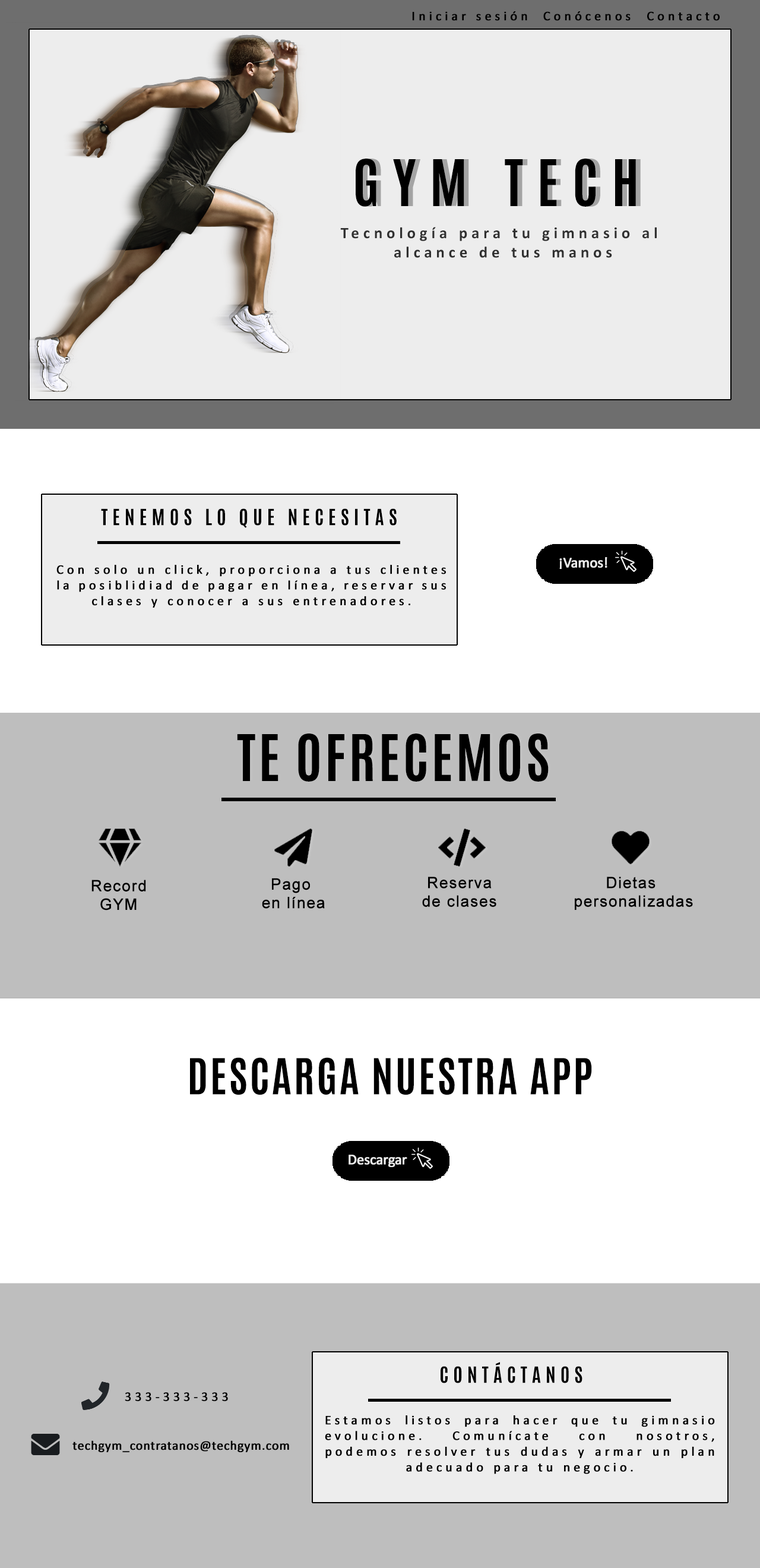
<style>
.page{position:relative;width:760px;height:1568px;background:#bebebe}
.page>*{position:absolute;margin:0}
.t1{font:13.1px "Calibri";letter-spacing:0.25em;color:#000000;font-weight:bold}
.t2{font:54.6px "Antonio-Bold";letter-spacing:0.25em;color:#000000;text-transform:uppercase}
.t3{font:54.6px "Antonio-Bold";letter-spacing:0.25em;text-transform:uppercase}
.t4{font:16px "Calibri-Bold";letter-spacing:0.25em;color:#303030}
.t5{font:19px "Antonio-Bold";letter-spacing:0.25em;color:#000000;text-transform:uppercase}
.t6{font:14.8px "Calibri";letter-spacing:-0.03em;color:#ededed;font-weight:bold}
.t7{font:13.1px "ArialMT";letter-spacing:0.25em;color:#000000;font-weight:bold}
.t8{font:54.6px "Antonio-Bold";letter-spacing:0.05em;color:#000000;text-transform:uppercase}
.t9{font:54.6px "Antonio-Bold";letter-spacing:0.05em;text-transform:uppercase}
.t10{font:15.4px "ArialMT";letter-spacing:0.05em;color:#000000;font-weight:bold}
.t11{font:42.2px "Antonio-Bold";letter-spacing:0.05em;color:#000000;text-transform:uppercase}
.t12{font:13.1px "Calibri";letter-spacing:0.02em;color:#000000;font-weight:bold}
</style>
<div class="page">
<p class="t1" style="left:412px;top:11px;width:308px;height:10px">Iniciar sesión  Conócenos  Contacto</p>
<p class="t2" style="left:356px;top:159px;width:280px;height:48px">gym tech</p>
<p class="t3" style="left:361px;top:159px;width:280px;height:48px">gym tech</p>
<p class="t4" style="left:340px;top:227px;width:317px;height:31px;text-align:center">Tecnología para tu gimnasio al <br>alcance de tus manos</p>
<p class="t5" style="left:101px;top:508px;width:296px;height:20px">tenemos lo que necesitas</p>
<p class="t6" style="left:559px;top:557px;width:49px;height:12px">¡Vamos!</p>
<p class="t7" style="left:56px;top:565px;width:390px;height:43px;text-align:justify">Con solo un click, proporciona a tus clientes la posiblidiad de pagar en línea, reservar sus clases y conocer a sus entrenadores.</p>
<p class="t8" style="left:237px;top:734px;width:312px;height:48px">te ofrecemos</p>
<p class="t9" style="left:239px;top:732px;width:312px;height:48px">te ofrecemos</p>
<p class="t10" style="left:91px;top:880px;width:55px;height:31px;text-align:center">Record<br>GYM</p>
<p class="t10" style="left:262px;top:878px;width:63px;height:31px;text-align:center">Pago <br>en línea</p>
<p class="t10" style="left:422px;top:877px;width:75px;height:30px;text-align:center">Reserva<br>de clases</p>
<p class="t10" style="left:575px;top:877px;width:118px;height:33px;text-align:center">Dietas <br>personalizadas</p>
<p class="t11" style="left:190px;top:1057px;width:402px;height:38px">descarga nuestra app</p>
<p class="t6" style="left:349px;top:1155px;width:58px;height:12px">Descargar</p>
<p class="t5" style="left:441px;top:1362px;width:142px;height:21px">contáctanos</p>
<p class="t1" style="left:125px;top:1392px;width:103px;height:9px">333-333-333</p>
<p class="t1" style="left:325px;top:1415px;width:390px;height:59px;text-align:justify">Estamos listos para hacer que tu gimnasio evolucione. Comunícate con nosotros, podemos resolver tus dudas y armar un plan adecuado para tu negocio.</p>
<p class="t12" style="left:72px;top:1440px;width:217px;height:12px">techgym_contratanos@techgym.com</p>
</div>
